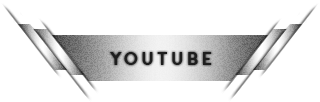
<style>
.page{position:relative;width:320px;height:102px;background:#ffffff}
.page>*{position:absolute;margin:0}
.t1{font:18px "Porter-BoldDEMO";letter-spacing:0.14em;color:#1e1e1e}
</style>
<div class="page">
<p class="t1" style="left:109px;top:52px;width:103px;height:13px">YOUTUBE</p>
</div>
